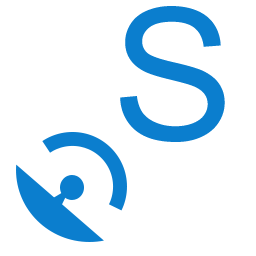
<style>
.page{position:relative;width:256px;height:256px;background:#ffffff}
.page>*{position:absolute;margin:0}
.t1{font:183.3px "ArialMT";color:#0b7ece}
</style>
<div class="page">
<p class="t1" style="left:120px;top:6px;width:105px;height:136px">S</p>
</div>
